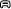
<style>
.page{position:relative;width:11px;height:9px;background:#ffffff}
.page>*{position:absolute;margin:0}
.t1{font:10px "ThundergodII";color:#ffffff}
</style>
<div class="page">
<p class="t1" style="left:1px;top:1px;width:9px;height:7px">A</p>
</div>
